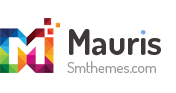
<style>
.page{position:relative;width:176px;height:93px;background:#ffffff}
.page>*{position:absolute;margin:0}
.t1{font:15px/18px "Dosis-Regular";color:#9b9b9b}
.t2{font:35px/60px "Dosis-Bold";color:#3e3939}
</style>
<div class="page">
<p class="t1" style="left:67px;top:29px;width:94px;height:44px;text-align:right"><span class="t2">Mauris<br></span>Smthemes.com</p>
</div>
